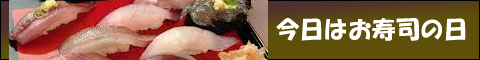
<style>
.page{position:relative;width:480px;height:60px}
.page>*{position:absolute;margin:0}
.t1{font:24px "HGSoeiKakupoptai";color:#ffffff}
</style>
<div class="page">
<p class="t1" style="left:276px;top:18px;width:190px;height:23px">今日はお寿司の日</p>
</div>
